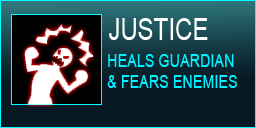
<style>
.page{position:relative;width:256px;height:128px;background:#061924}
.page>*{position:absolute;margin:0}
.t1{font:30px "ArialMT";color:#ffffff;scale:0.8 1}
.t2{font:18px "ArialMT";color:#00f3ff;scale:0.8 1}
</style>
<div class="page">
<p class="t1" style="left:109px;top:18px;width:99px;height:22px">JUSTICE</p>
<p class="t2" style="left:107px;top:54px;width:130px;height:34px">HEALS GUARDIAN<br>&amp; FEARS ENEMIES</p>
</div>
